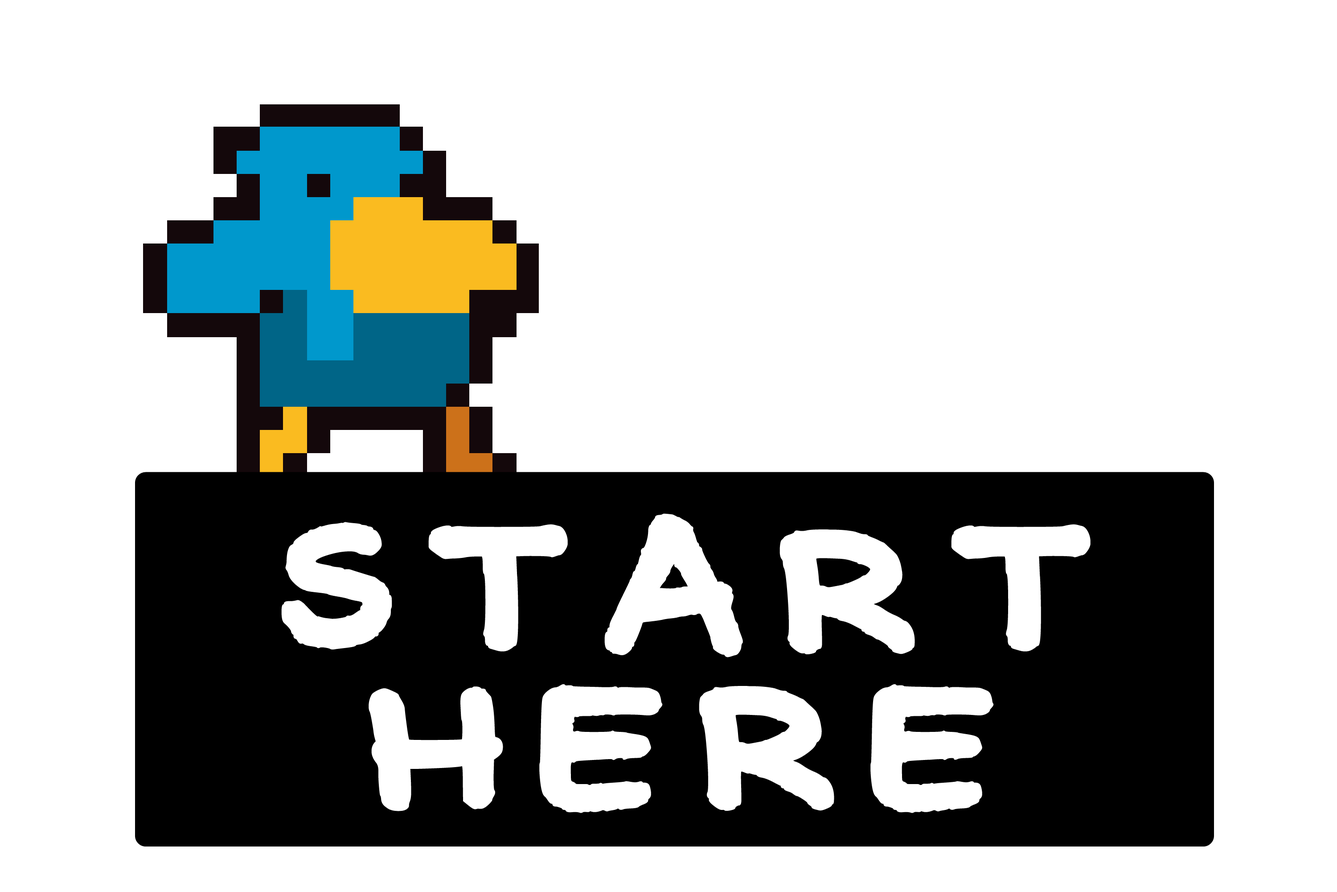
<style>
.page{position:relative;width:1337px;height:892px;background:#ffffff}
.page>*{position:absolute;margin:0}
.t1{font:178.3px "ComiquitaSans";color:#ffffff;font-weight:bold;scale:1.24 1}
</style>
<div class="page">
<p class="t1" style="left:281px;top:513px;width:810px;height:144px">START</p>
<p class="t1" style="left:369px;top:684px;width:625px;height:129px">HERE</p>
</div>
